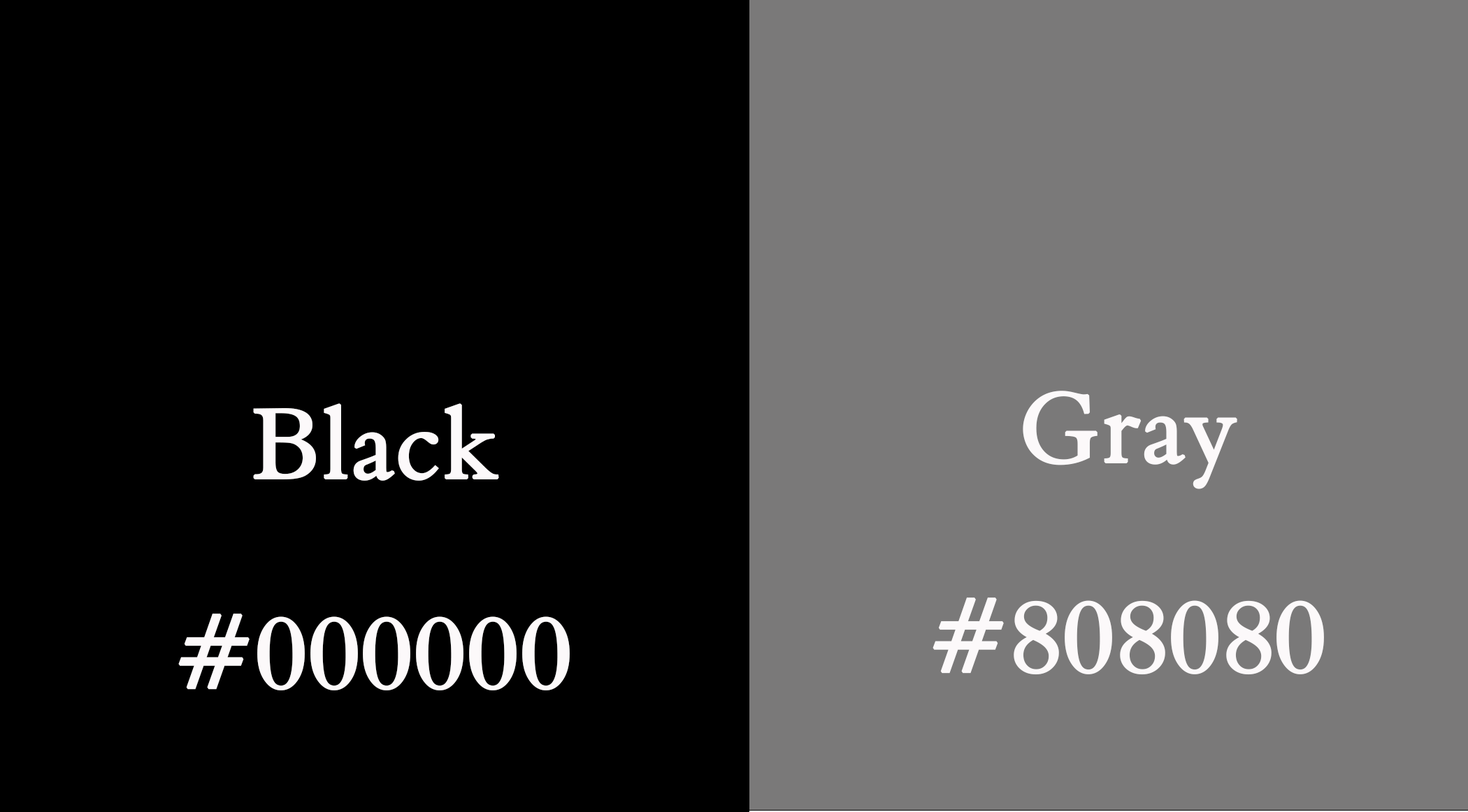
<style>
.page{position:relative;width:1468px;height:812px;background:#000000}
.page>*{position:absolute;margin:0}
.t1{font:174.8px "Aldine401BT-RomanA";color:#fcf9fa;font-weight:bold}
</style>
<div class="page">
<p class="t1" style="left:933px;top:391px;width:391px;height:284px;text-align:center">Gray<br>#808080</p>
<p class="t1" style="left:178px;top:403px;width:392px;height:288px;text-align:center">Black<br>#000000</p>
</div>
